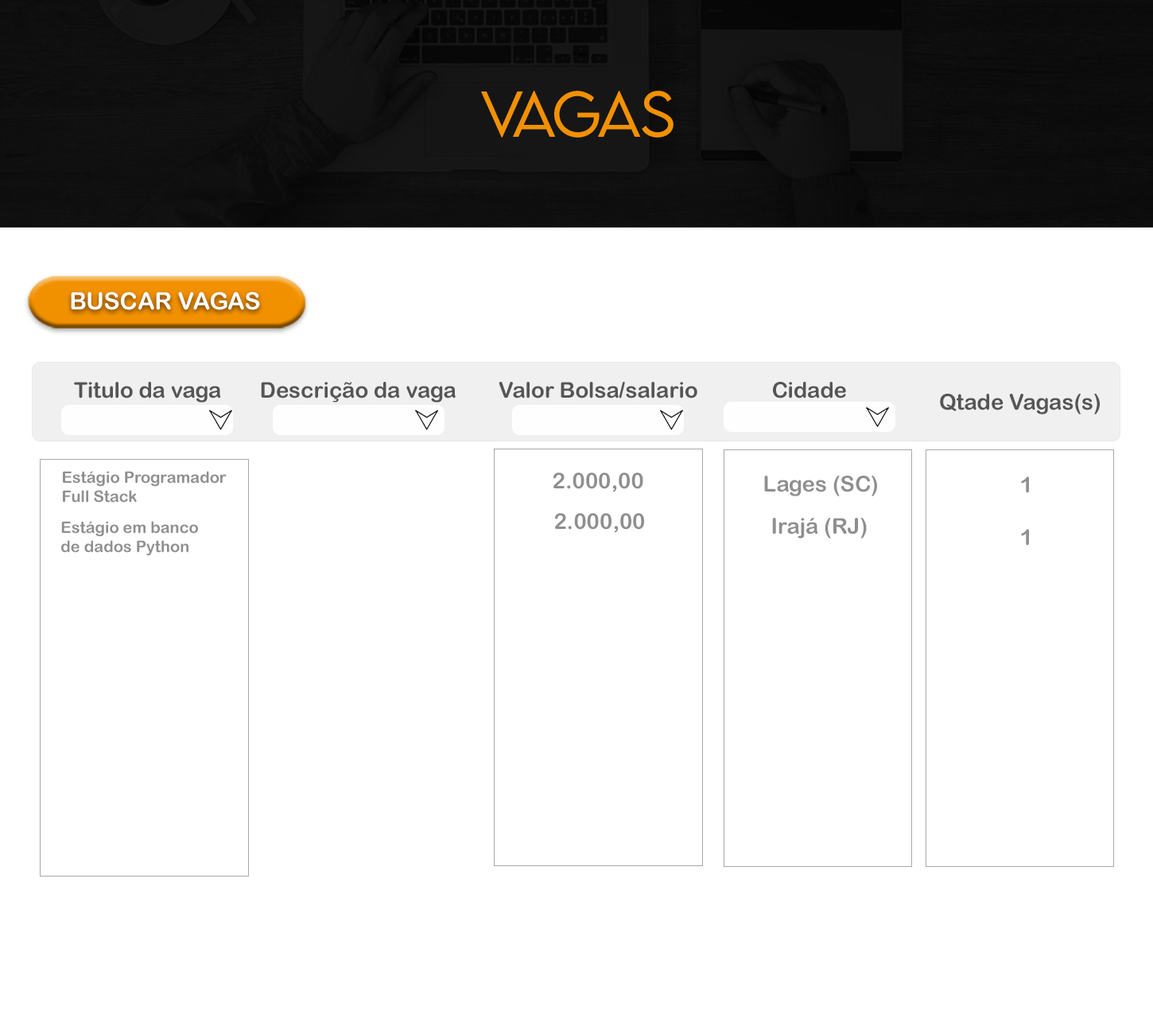
<style>
.page{position:relative;width:1153px;height:1034px;background:#ffffff}
.page>*{position:absolute;margin:0}
.t1{font:57.5px "LEMONMILK-Light";color:#f29100}
.t2{font:23.9px "ArialRoundedMTBold";color:#fdfdfc}
.t3{font:21.9px "ArialRoundedMTBold";color:#545654}
.t4{font:15.9px "ArialRoundedMTBold";color:#8e8f8e}
.t5{font:21.9px "ArialRoundedMTBold";color:#8e8f8e}
</style>
<div class="page">
<p class="t1" style="left:481px;top:91px;width:193px;height:47px">VAGAS</p>
<p class="t2" style="left:71px;top:292px;width:189px;height:18px">BUSCAR VAGAS</p>
<p class="t3" style="left:74px;top:382px;width:147px;height:20px">Titulo da vaga</p>
<p class="t3" style="left:261px;top:382px;width:195px;height:20px">Descrição da vaga</p>
<p class="t3" style="left:499px;top:382px;width:199px;height:16px">Valor Bolsa/salario</p>
<p class="t3" style="left:773px;top:382px;width:73px;height:16px">Cidade</p>
<p class="t3" style="left:940px;top:394px;width:160px;height:20px">Qtade Vagas(s)</p>
<p class="t4" style="left:63px;top:471px;width:164px;height:32px;text-align:justify">Estágio Programador<br>Full Stack</p>
<p class="t5" style="left:554px;top:472px;width:89px;height:20px">2.000,00</p>
<p class="t5" style="left:764px;top:476px;width:113px;height:20px">Lages (SC)</p>
<p class="t5" style="left:1021px;top:476px;width:8px;height:70px;text-align:justify">1<br><br>1</p>
<p class="t4" style="left:61px;top:521px;width:137px;height:35px;text-align:justify">Estágio em banco<br>de dados Python</p>
<p class="t5" style="left:555px;top:513px;width:89px;height:20px">2.000,00</p>
<p class="t5" style="left:772px;top:518px;width:95px;height:20px">Irajá (RJ)</p>
</div>
